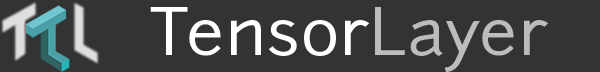
<style>
.page{position:relative;width:600px;height:72px;background:#333333}
.page>*{position:absolute;margin:0}
.t1{font:62.3px "Junction-Regular";color:#ffffff;scale:1.09 1}
.t2{font:62.3px "Junction-Regular";color:#bcbcbc;scale:1.09 1}
</style>
<div class="page">
<p class="t1" style="left:150px;top:7px;width:399px;height:65px">Tensor<span class="t2">Layer</span></p>
</div>
